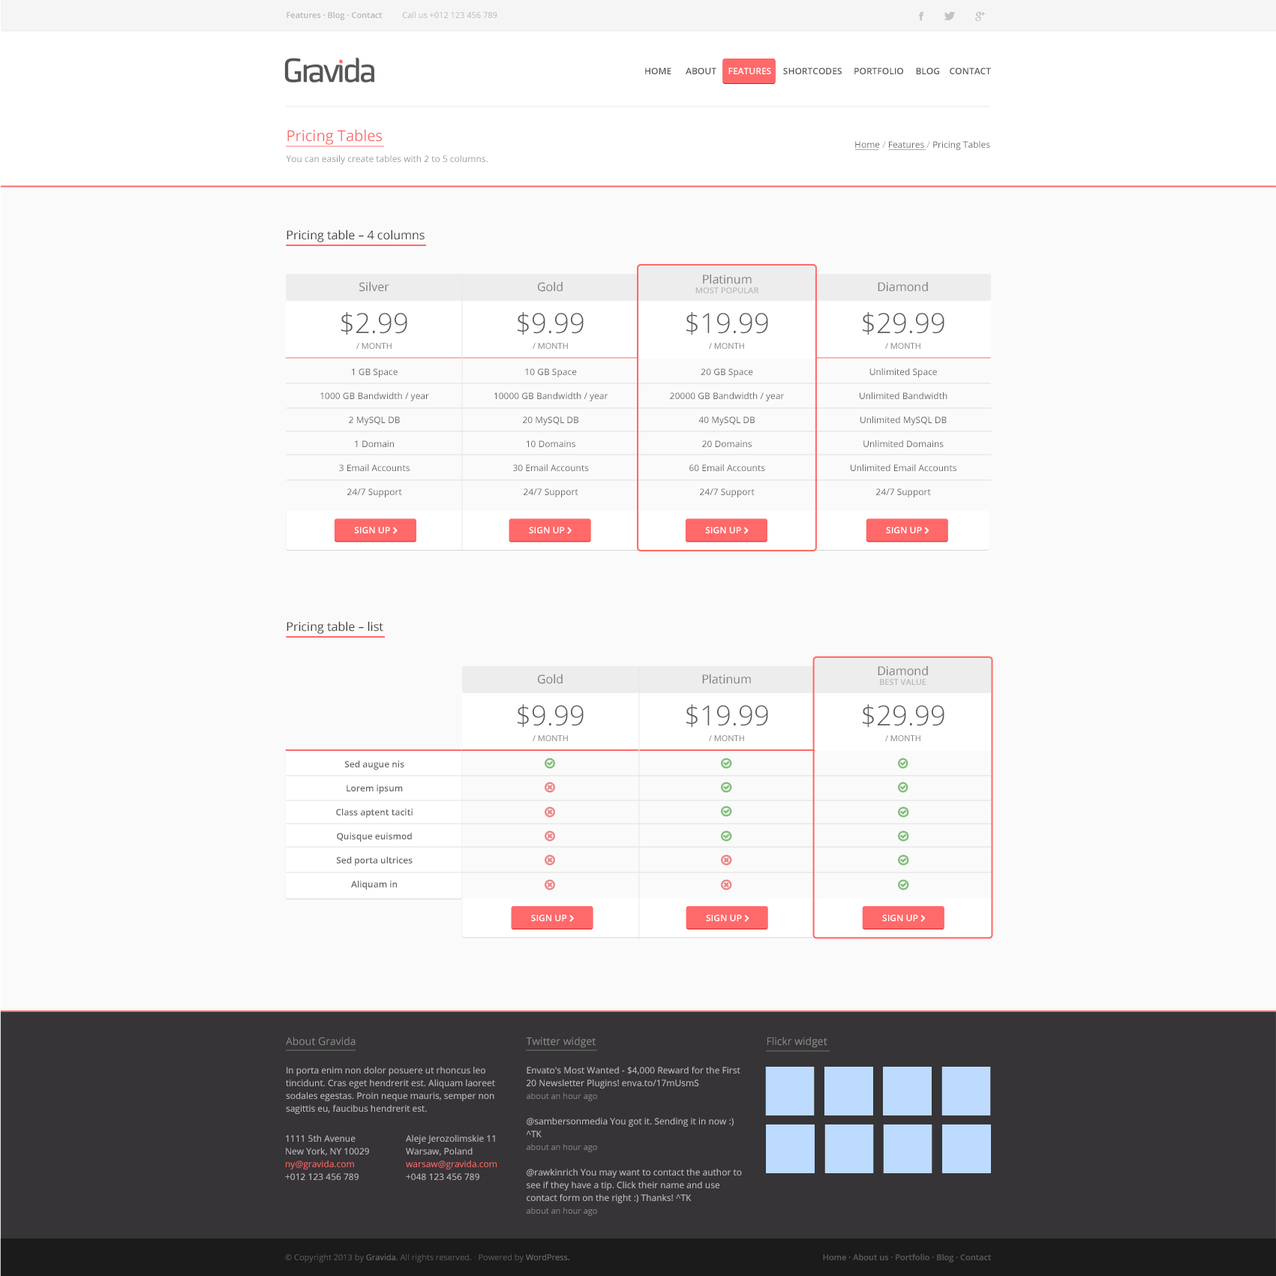
<style>
.page{position:relative;width:1276px;height:1276px;background:#fafafa}
.page>*{position:absolute;margin:0}
.t1{font:8.2px "OpenSans-Semibold";color:#b5b5b5}
.t2{font:8.2px "OpenSans";color:#b5b5b5}
.t3{font:9px "OpenSans-Semibold";color:#575657;text-transform:uppercase}
.t4{font:9px "OpenSans-Semibold";color:#fffcff;text-transform:uppercase}
.t5{font:9px/11.2px "OpenSans";color:#999999}
.t6{font:15px/20.2px "OpenSans";color:#ff6969}
.t7{font:9px "OpenSans";color:#666666}
.t8{font:9px "OpenSans";color:#b3b3b3}
.t9{font:12px "OpenSans";color:#3d3d3d}
.t10{font:12px "OpenSans";color:#7d7d7d}
.t11{font:8.2px/9.8px "OpenSans-Semibold";color:#b8b8b8;text-transform:uppercase}
.t12{font:12px/9.8px "OpenSans";color:#7d7d7d}
.t13{font:27.8px "OpenSans-Light";color:#595959}
.t14{font:8.2px "OpenSans";color:#7d7d7d;text-transform:uppercase}
.t15{font:9px/24px "OpenSans";color:#666666}
.t16{font:9px/24px "OpenSans-Semibold";color:#666666}
.t17{font:10.5px "OpenSans";color:#8a8a8a}
.t18{font:9px/12.8px "OpenSans";color:#c7bec7}
.t19{font:8.2px/12.8px "OpenSans";color:#878787}
.t20{font:9px/12.8px "OpenSans";color:#ff6969}
.t21{font:8.2px "OpenSans";color:#5c595c}
.t22{font:8.2px "OpenSans";color:#757175}
.t23{font:8.2px "ArialMT";color:#5c595c}
.t24{font:8.2px "OpenSans-Semibold";color:#5c595c}
</style>
<div class="page">
<p class="t1" style="left:286px;top:11px;width:96px;height:9px">Features · Blog · Contact</p>
<p class="t2" style="left:403px;top:11px;width:94px;height:7px">Call us +012 123 456 789</p>
<p class="t3" style="left:645px;top:68px;width:346px;height:6px">Home      About     <span class="t4">Features </span>    Shortcodes     Portfolio     Blog    Contact</p>
<p class="t5" style="left:286px;top:129px;width:202px;height:35px"><span class="t6">Pricing Tables<br><br></span>You can easily create tables with 2 to 5 columns.</p>
<p class="t7" style="left:855px;top:141px;width:135px;height:9px">Home <span class="t8">/ </span>Features <span class="t8">/ </span>Pricing Tables</p>
<p class="t9" style="left:286px;top:230px;width:138px;height:12px">Pricing table – 4 columns</p>
<p class="t10" style="left:359px;top:281px;width:30px;height:11px">Silver</p>
<p class="t10" style="left:538px;top:281px;width:24px;height:11px">Gold</p>
<p class="t11" style="left:695px;top:274px;width:64px;height:19px;text-align:center"><span class="t12">Platinum<br></span>most popular</p>
<p class="t10" style="left:878px;top:281px;width:50px;height:11px">Diamond</p>
<p class="t13" style="left:341px;top:312px;width:66px;height:23px">$2.99</p>
<p class="t13" style="left:518px;top:312px;width:66px;height:23px">$9.99</p>
<p class="t13" style="left:686px;top:312px;width:82px;height:23px">$19.99</p>
<p class="t13" style="left:862px;top:312px;width:82px;height:23px">$29.99</p>
<p class="t14" style="left:356px;top:343px;width:36px;height:6px">/ month</p>
<p class="t14" style="left:532px;top:343px;width:36px;height:6px">/ month</p>
<p class="t14" style="left:709px;top:343px;width:35px;height:6px">/ month</p>
<p class="t14" style="left:885px;top:343px;width:35px;height:6px">/ month</p>
<p class="t15" style="left:320px;top:368px;width:109px;height:129px;text-align:center">1 GB Space<br>1000 GB Bandwidth / year<br>2 MySQL DB<br>1 Domain<br>3 Email Accounts<br>24/7 Support</p>
<p class="t15" style="left:494px;top:368px;width:114px;height:129px;text-align:center">10 GB Space<br>10000 GB Bandwidth / year<br>20 MySQL DB<br>10 Domains<br>30 Email Accounts<br>24/7 Support</p>
<p class="t15" style="left:670px;top:368px;width:114px;height:129px;text-align:center">20 GB Space<br>20000 GB Bandwidth / year<br>40 MySQL DB<br>20 Domains<br>60 Email Accounts<br>24/7 Support</p>
<p class="t15" style="left:850px;top:368px;width:106px;height:129px;text-align:center">Unlimited Space<br>Unlimited Bandwidth<br>Unlimited MySQL DB<br>Unlimited Domains<br>Unlimited Email Accounts<br>24/7 Support</p>
<p class="t9" style="left:286px;top:621px;width:97px;height:13px">Pricing table – list</p>
<p class="t11" style="left:878px;top:665px;width:50px;height:20px;text-align:center"><span class="t12">Diamond<br></span>Best value</p>
<p class="t10" style="left:538px;top:674px;width:24px;height:10px">Gold</p>
<p class="t10" style="left:702px;top:674px;width:49px;height:10px">Platinum</p>
<p class="t13" style="left:518px;top:704px;width:66px;height:24px">$9.99</p>
<p class="t13" style="left:686px;top:704px;width:82px;height:24px">$19.99</p>
<p class="t13" style="left:862px;top:704px;width:82px;height:24px">$29.99</p>
<p class="t14" style="left:532px;top:735px;width:36px;height:6px">/ month</p>
<p class="t14" style="left:709px;top:735px;width:35px;height:6px">/ month</p>
<p class="t14" style="left:885px;top:735px;width:35px;height:6px">/ month</p>
<p class="t16" style="left:336px;top:760px;width:76px;height:130px;text-align:center">Sed augue nis<br>Lorem ipsum<br>Class aptent taciti<br>Quisque euismod<br>Sed porta ultrices<br>Aliquam in</p>
<p class="t17" style="left:286px;top:1036px;width:70px;height:10px">About Gravida</p>
<p class="t17" style="left:526px;top:1036px;width:70px;height:12px">Twitter widget</p>
<p class="t17" style="left:767px;top:1036px;width:60px;height:12px">Flickr widget</p>
<p class="t18" style="left:286px;top:1066px;width:209px;height:48px">In porta enim non dolor posuere ut rhoncus leo tincidunt. Cras eget hendrerit est. Aliquam laoreet sodales egestas. Proin neque mauris, semper non sagittis eu, faucibus hendrerit est.</p>
<p class="t18" style="left:526px;top:1066px;width:216px;height:150px">Envato's Most Wanted - $4,000 Reward for the First 20 Newsletter Plugins! enva.to/17mUsmS<br><span class="t19">about an hour ago<br><br></span>@sambersonmedia You got it. Sending it in now :) ^TK<br><span class="t19">about an hour ago<br><br></span>@rawkinrich You may want to contact the author to see if they have a tip. Click their name and use contact form on the right :) Thanks! ^TK<br><span class="t19">about an hour ago</span></p>
<p class="t18" style="left:285px;top:1135px;width:84px;height:45px">1111 5th Avenue<br>New York, NY 10029<br><span class="t20">ny@gravida.com<br></span>+012 123 456 789</p>
<p class="t18" style="left:406px;top:1135px;width:90px;height:45px">Aleje Jerozolimskie 11<br>Warsaw, Poland<br><span class="t20">warsaw@gravida.com<br></span>+048 123 456 789</p>
<p class="t21" style="left:285px;top:1253px;width:284px;height:9px">© Copyright 2013 by <span class="t22">Gravida</span>. All rights reserved. <span class="t23">∙</span> Powered by <span class="t22">WordPress.</span></p>
<p class="t24" style="left:823px;top:1253px;width:168px;height:9px">Home · About us · Portfolio · Blog · Contact</p>
</div>
